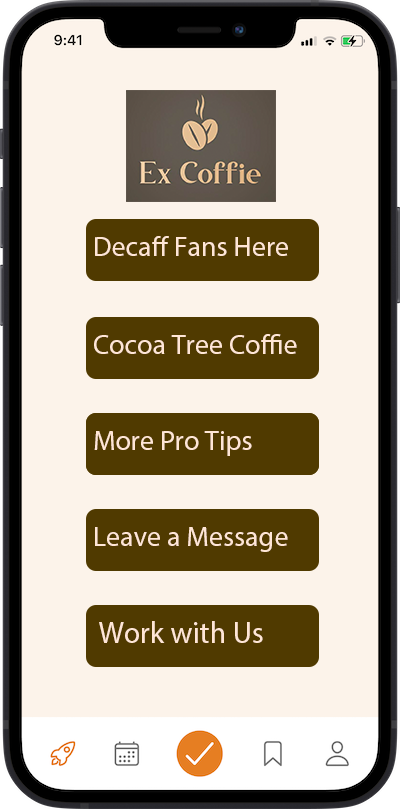
<style>
.page{position:relative;width:400px;height:809px;background:#fcf3ea}
.page>*{position:absolute;margin:0}
.t1{font:28px "MyriadPro-Regular";color:#ffe6d6}
.t2{font:30px "MyriadPro-Regular";color:#ffe6d6}
</style>
<div class="page">
<p class="t1" style="left:95px;top:236px;width:193px;height:20px">Decaff Fans Here</p>
<p class="t1" style="left:94px;top:334px;width:203px;height:20px">Cocoa Tree Coffie</p>
<p class="t1" style="left:94px;top:431px;width:158px;height:25px">More Pro Tips</p>
<p class="t1" style="left:95px;top:527px;width:193px;height:25px">Leave a Message</p>
<p class="t2" style="left:99px;top:621px;width:164px;height:22px">Work with Us</p>
</div>
